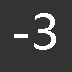
<style>
.page{position:relative;width:72px;height:72px;background:#333333}
.page>*{position:absolute;margin:0}
.t1{font:48px "MicrosoftYaHei";color:#ffffff}
</style>
<div class="page">
<p class="t1" style="left:14px;top:13px;width:42px;height:37px">-3</p>
</div>
